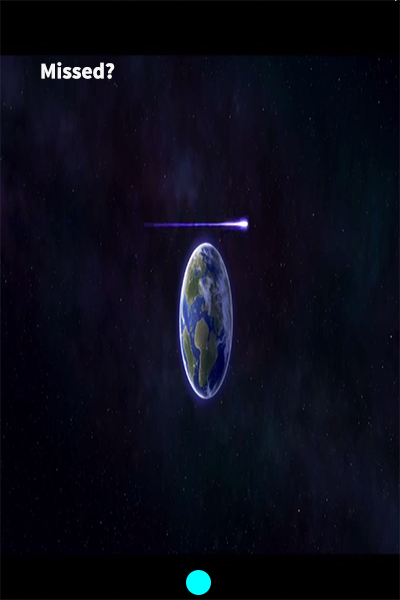
<style>
.page{position:relative;width:400px;height:600px}
.page>*{position:absolute;margin:0}
.t1{font:22.1px "SourceSansPro-Bold";color:#f6f6f6}
</style>
<div class="page">
<p class="t1" style="left:41px;top:62px;width:74px;height:17px">Missed?</p>
</div>
